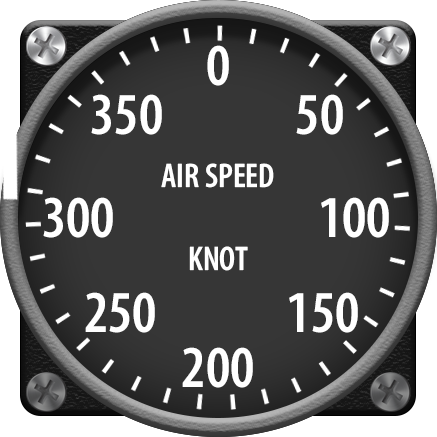
<style>
.page{position:relative;width:437px;height:437px;background:#363636}
.page>*{position:absolute;margin:0}
.t1{font:59.7px "MyriadConceptRoman-SemiboldCondensed";color:#ffffff}
.t2{font:34.3px "MyriadConceptRoman-SemiboldCondensed";color:#ffffff}
</style>
<div class="page">
<p class="t1" style="left:207px;top:45px;width:22px;height:41px">0</p>
<p class="t1" style="left:91px;top:94px;width:71px;height:41px">350</p>
<p class="t1" style="left:296px;top:94px;width:47px;height:41px">50</p>
<p class="t2" style="left:161px;top:163px;width:113px;height:108px;text-align:center">AIR SPEED<br><br>KNOT</p>
<p class="t1" style="left:43px;top:197px;width:70px;height:41px">300</p>
<p class="t1" style="left:321px;top:197px;width:68px;height:41px">100</p>
<p class="t1" style="left:85px;top:292px;width:70px;height:41px">250</p>
<p class="t1" style="left:289px;top:292px;width:69px;height:41px">150</p>
<p class="t1" style="left:182px;top:347px;width:71px;height:41px">200</p>
</div>
